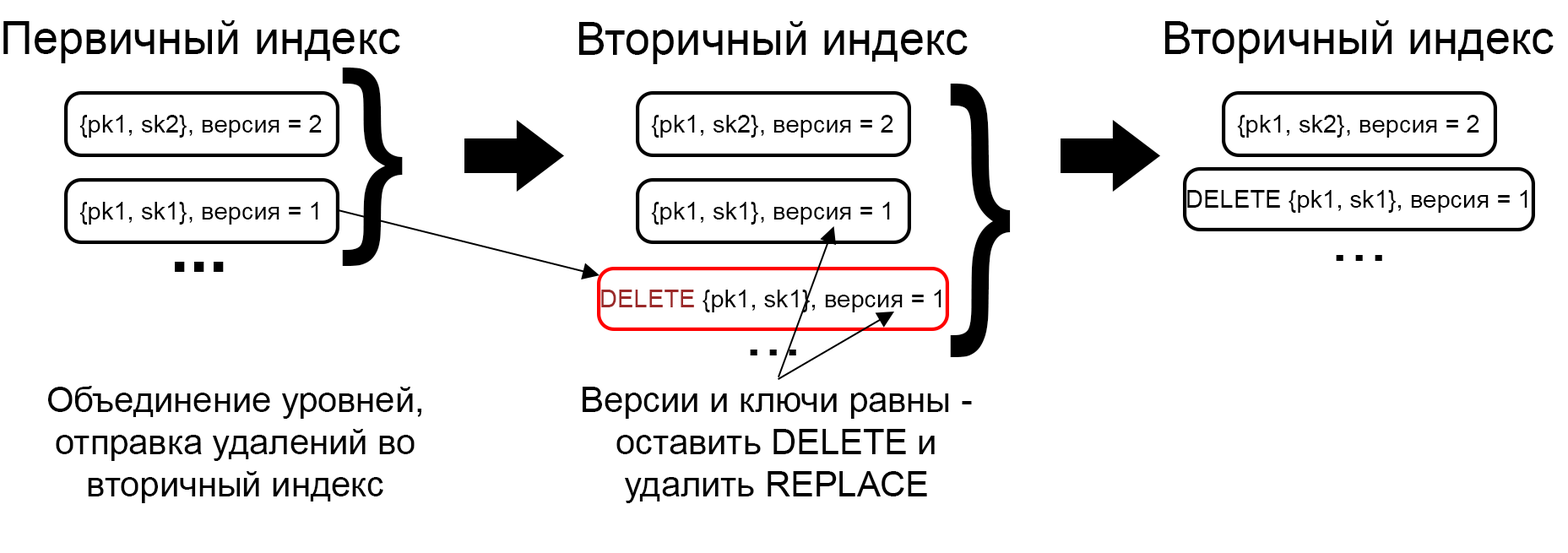
<style>
.page{position:relative;width:1568px;height:553px;background:#ffffff}
.page>*{position:absolute;margin:0}
.t1{font:45.7px "ArialMT";color:#000000}
.t2{font:211.1px "ArialMT";color:#000000}
.t3{font:290.9px "ArialMT";color:#000000;scale:0.72 1}
.t4{font:24.6px "ArialMT";color:#000000}
.t5{font:70.4px "ArialMT";color:#000000}
.t6{font:70.4px "Arial-BoldMT";color:#000000}
.t7{font:24.6px "ArialMT";color:#9b2929}
.t8{font:35.2px "ArialMT";color:#000000}
</style>
<div class="page">
<p class="t1" style="left:3px;top:20px;width:397px;height:43px">Первичный индекс</p>
<p class="t1" style="left:578px;top:21px;width:390px;height:43px">Вторичный индекс</p>
<p class="t1" style="left:1164px;top:20px;width:390px;height:43px">Вторичный индекс</p>
<p class="t2" style="left:342px;top:68px;width:61px;height:198px">}</p>
<p class="t3" style="left:950px;top:84px;width:61px;height:273px">}</p>
<p class="t4" style="left:79px;top:115px;width:243px;height:23px">{pk1, sk2}, версия = 2</p>
<p class="t4" style="left:651px;top:115px;width:242px;height:23px">{pk1, sk2}, версия = 2</p>
<p class="t4" style="left:1237px;top:115px;width:242px;height:23px">{pk1, sk2}, версия = 2</p>
<p class="t4" style="left:1187px;top:190px;width:340px;height:23px">DELETE {pk1, sk1}, версия = 1</p>
<p class="t4" style="left:79px;top:202px;width:239px;height:23px">{pk1, sk1}, версия = 1</p>
<p class="t4" style="left:651px;top:202px;width:239px;height:23px">{pk1, sk1}, версия = 1</p>
<p class="t5" style="left:1336px;top:255px;width:46px;height:6px">...</p>
<p class="t6" style="left:175px;top:262px;width:49px;height:10px">...</p>
<p class="t4" style="left:601px;top:290px;width:340px;height:22px"><span class="t7">DELETE </span>{pk1, sk1}, версия = 1</p>
<p class="t5" style="left:750px;top:350px;width:46px;height:5px">...</p>
<p class="t8" style="left:48px;top:386px;width:373px;height:117px;text-align:center">Объединение уровней,<br>отправка удалений во<br>вторичный индекс</p>
<p class="t8" style="left:583px;top:387px;width:389px;height:116px;text-align:center">Версии и ключи равны -<br>оставить DELETE и<br>удалить REPLACE</p>
</div>
